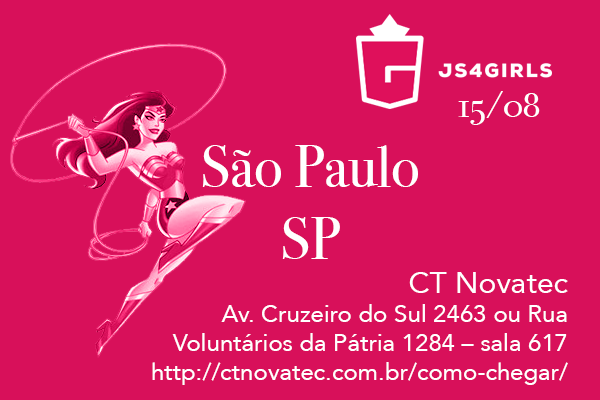
<style>
.page{position:relative;width:600px;height:400px;background:#d8105a}
.page>*{position:absolute;margin:0}
.t1{font:36px "BodoniSvtyTwoOSITCTT-Book";color:#ffffff}
.t2{font:60px "BodoniSvtyTwoOSITCTT-Book";color:#ffffff}
.t3{font:24px "Avenir-Roman";color:#ffffff}
.t4{font:30px "Avenir-Roman";color:#ffffff}
</style>
<div class="page">
<p class="t1" style="left:458px;top:91px;width:82px;height:34px">15/08</p>
<p class="t2" style="left:202px;top:145px;width:216px;height:114px;text-align:center">São Paulo<br>SP</p>
<p class="t3" style="left:152px;top:272px;width:416px;height:113px;text-align:right"><span class="t4">CT Novatec<br></span>Av. Cruzeiro do Sul 2463 ou Rua Voluntários da Pátria 1284 – sala 617<br>http://ctnovatec.com.br/como-chegar/</p>
</div>
